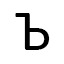
<style>
.page{position:relative;width:64px;height:64px;background:#ffffff}
.page>*{position:absolute;margin:0}
.t1{font:58.3px "Calibri";color:#000000}
</style>
<div class="page">
<p class="t1" style="left:15px;top:13px;width:35px;height:37px">Ъ</p>
</div>
